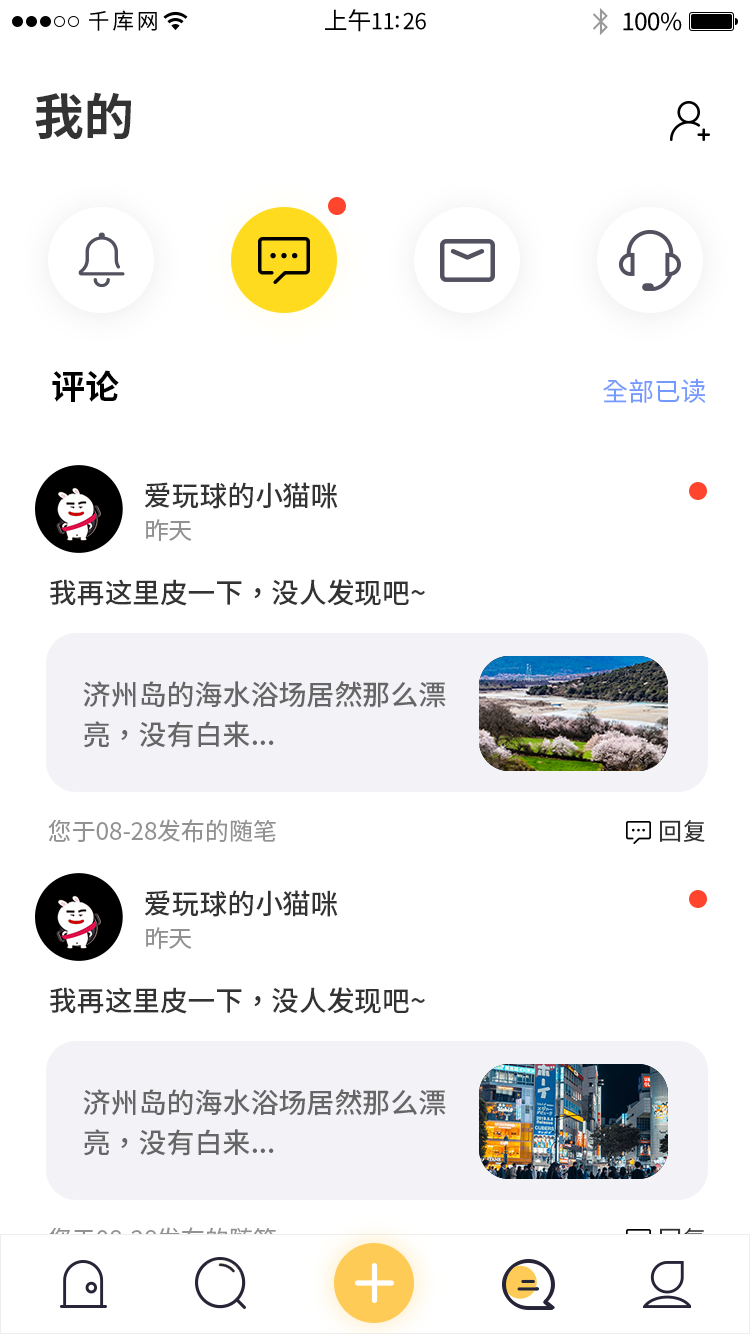
<style>
.page{position:relative;width:750px;height:1334px;background:#ffffff}
.page>*{position:absolute;margin:0}
.t1{font:50px "SourceHanSansSC-Bold";color:#333333}
.t2{font:34px "SourceHanSansSC-Bold";color:#000000}
.t3{font:26px "SourceHanSansSC-Regular";color:#759aff}
.t4{font:27.8px "SourceHanSansSC-Medium";color:#333333}
.t5{font:24px "SourceHanSansSC-Regular";color:#929292}
.t6{font:28px/40px "SourceHanSansSC-Medium";color:#666666}
.t7{font:24px "SourceHanSansSC-Regular";color:#333333}
.t8{font:24px "SourceHanSansSC-Regular";color:#ffffff}
</style>
<div class="page">
<p class="t1" style="left:35px;top:92px;width:96px;height:47px">我的</p>
<p class="t2" style="left:52px;top:370px;width:67px;height:32px">评论</p>
<p class="t3" style="left:603px;top:378px;width:103px;height:25px">全部已读</p>
<p class="t4" style="left:144px;top:482px;width:194px;height:27px">爱玩球的小猫咪</p>
<p class="t5" style="left:146px;top:519px;width:46px;height:22px">昨天</p>
<p class="t4" style="left:50px;top:579px;width:375px;height:27px">我再这里皮一下，没人发现吧~</p>
<p class="t6" style="left:83px;top:681px;width:363px;height:67px">济州岛的海水浴场居然那么漂<br>亮，没有白来...</p>
<p class="t5" style="left:48px;top:819px;width:228px;height:24px">您于08-28发布的随笔</p>
<p class="t7" style="left:660px;top:819px;width:45px;height:23px">回复</p>
<p class="t4" style="left:144px;top:890px;width:194px;height:27px">爱玩球的小猫咪</p>
<p class="t5" style="left:146px;top:927px;width:46px;height:22px">昨天</p>
<p class="t4" style="left:50px;top:987px;width:375px;height:27px">我再这里皮一下，没人发现吧~</p>
<p class="t6" style="left:83px;top:1089px;width:363px;height:67px">济州岛的海水浴场居然那么漂<br>亮，没有白来...</p>
<p class="t8" style="left:48px;top:1227px;width:228px;height:24px">您于08-28发布的随笔</p>
<p class="t8" style="left:660px;top:1227px;width:45px;height:23px">回复</p>
</div>
